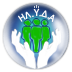
<style>
.page{position:relative;width:72px;height:72px;background:#ffffff}
.page>*{position:absolute;margin:0}
.t1{font:9.4px "MyriadPro-Regular";color:#fefefe}
.t2{font:10px "MyriadPro-Regular";color:#fefefe}
</style>
<div class="page">
<p class="t1" style="left:18px;top:8px;width:37px;height:14px;rotate:2deg">ΗΛ.<span class="t2">Y</span>.Δ.Α</p>
</div>
